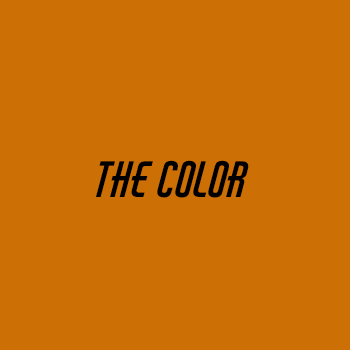
<style>
.page{position:relative;width:350px;height:350px;background:#cc6f04}
.page>*{position:absolute;margin:0}
.t1{font:47.7px "AirAmerica-Regular";color:#000000}
</style>
<div class="page">
<p class="t1" style="left:96px;top:160px;width:153px;height:38px">the color</p>
</div>
